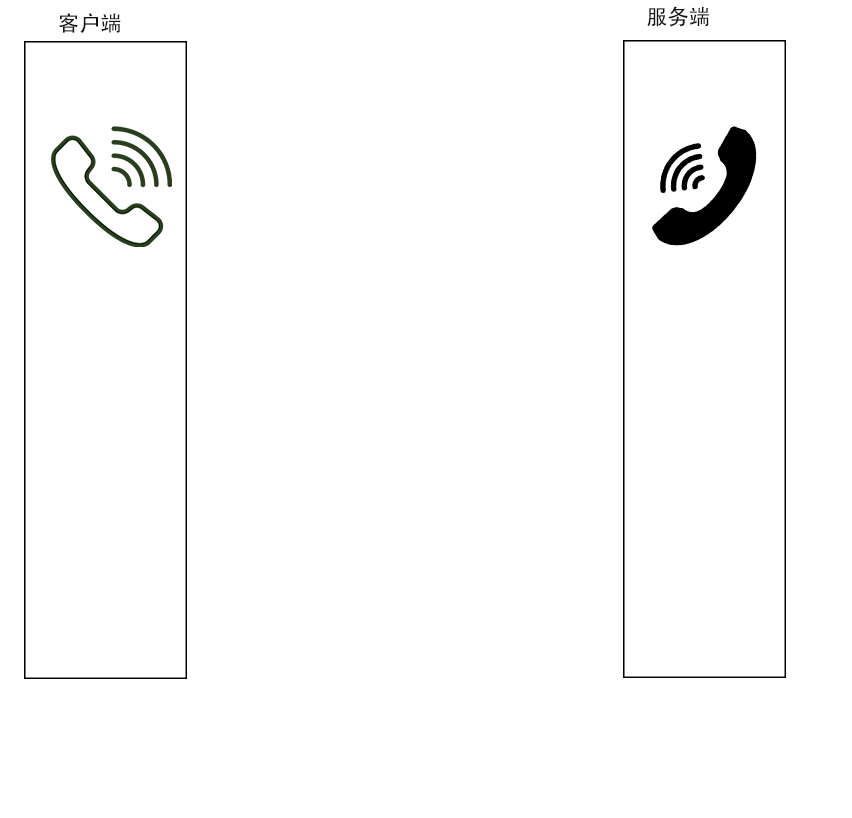
<style>
.page{position:relative;width:852px;height:818px;background:#ffffff}
.page>*{position:absolute;margin:0}
.t1{font:21.3px "AdobeHeitiStd-Regular";color:#151414}
</style>
<div class="page">
<p class="t1" style="left:647px;top:6px;width:62px;height:21px">服务端</p>
<p class="t1" style="left:59px;top:13px;width:62px;height:20px">客户端</p>
</div>
